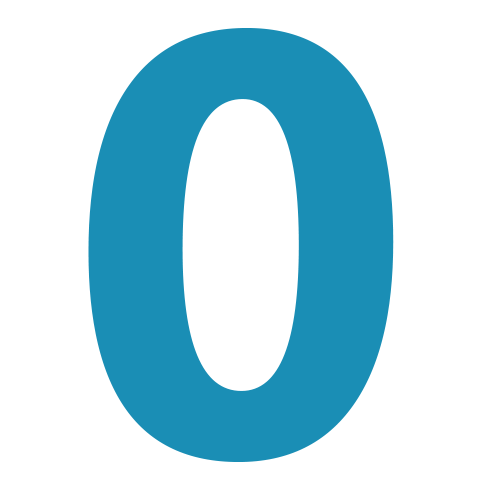
<style>
.page{position:relative;width:500px;height:500px;background:#ffffff}
.page>*{position:absolute;margin:0}
.t1{font:600px "MicrosoftTaiLe-Bold";color:#1a8eb5}
</style>
<div class="page">
<p class="t1" style="left:88px;top:28px;width:306px;height:434px">0</p>
</div>
